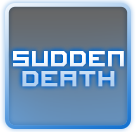
<style>
.page{position:relative;width:136px;height:132px}
.page>*{position:absolute;margin:0}
.t1{font:24px/10px "imagine-font";font-weight:bold}
</style>
<div class="page">
<p class="t1" style="left:13px;top:51px;width:111px;height:36px;text-align:center">sudden<br><br>death</p>
</div>
